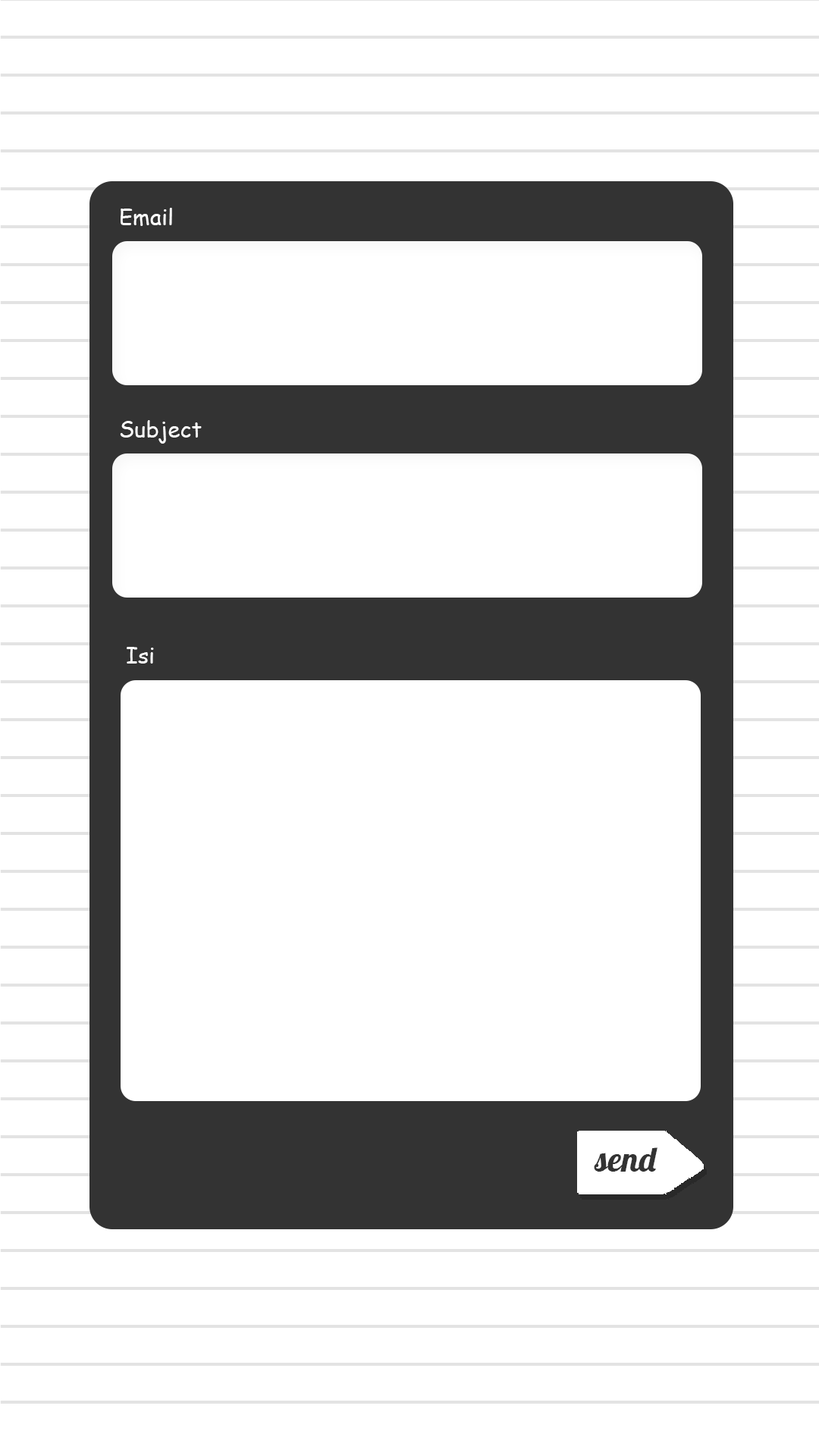
<style>
.page{position:relative;width:819px;height:1456px;background:#ffffff}
.page>*{position:absolute;margin:0}
.t1{font:22.1px "ComicSansMS";color:#ffffff}
.t2{font:34.8px "Lobster-Regular";color:#333333}
</style>
<div class="page">
<p class="t1" style="left:121px;top:208px;width:51px;height:18px">Email</p>
<p class="t1" style="left:120px;top:420px;width:82px;height:24px">Subject</p>
<p class="t1" style="left:127px;top:647px;width:27px;height:17px">Isi</p>
<p class="t2" style="left:594px;top:1147px;width:63px;height:25px">send</p>
</div>
